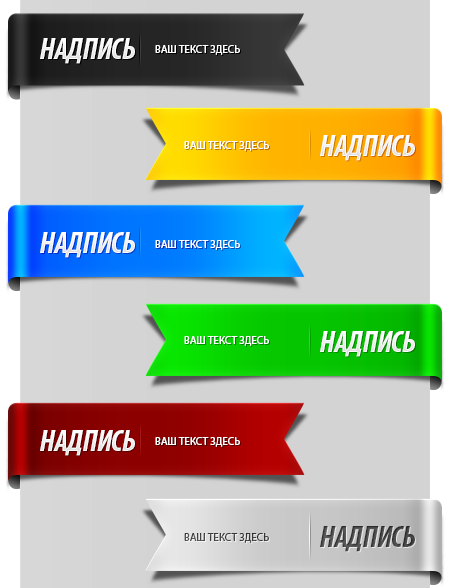
<style>
.page{position:relative;width:454px;height:588px;background:#d4d3d3}
.page>*{position:absolute;margin:0}
.t1{font:30px "MyriadPro-BoldCondIt";letter-spacing:-0.025em;color:#ffffff;text-transform:uppercase}
.t2{font:11px "MyriadPro-Regular";color:#ffffff;text-transform:uppercase}
.t3{font:11px "MyriadPro-Regular";color:#404040;text-transform:uppercase}
.t4{font:30px "MyriadPro-BoldCondIt";letter-spacing:-0.025em;color:#494949;text-transform:uppercase}
</style>
<div class="page">
<p class="t1" style="left:40px;top:38px;width:95px;height:26px">НАДПИСЬ</p>
<p class="t2" style="left:155px;top:45px;width:85px;height:10px">ВАШ ТЕКСТ ЗДЕСЬ</p>
<p class="t1" style="left:320px;top:135px;width:95px;height:26px">НАДПИСЬ</p>
<p class="t2" style="left:184px;top:141px;width:85px;height:10px">ВАШ ТЕКСТ ЗДЕСЬ</p>
<p class="t1" style="left:40px;top:232px;width:95px;height:26px">НАДПИСЬ</p>
<p class="t2" style="left:155px;top:240px;width:85px;height:10px">ВАШ ТЕКСТ ЗДЕСЬ</p>
<p class="t2" style="left:184px;top:336px;width:85px;height:10px">ВАШ ТЕКСТ ЗДЕСЬ</p>
<p class="t1" style="left:320px;top:331px;width:95px;height:26px">нАДПИСЬ</p>
<p class="t1" style="left:40px;top:430px;width:95px;height:26px">НАДПИСЬ</p>
<p class="t2" style="left:155px;top:437px;width:85px;height:10px">ВАШ ТЕКСТ ЗДЕСЬ</p>
<p class="t3" style="left:184px;top:533px;width:85px;height:10px">ВАШ ТЕКСТ ЗДЕСЬ</p>
<p class="t4" style="left:320px;top:526px;width:95px;height:26px">НАДПИСЬ</p>
</div>
